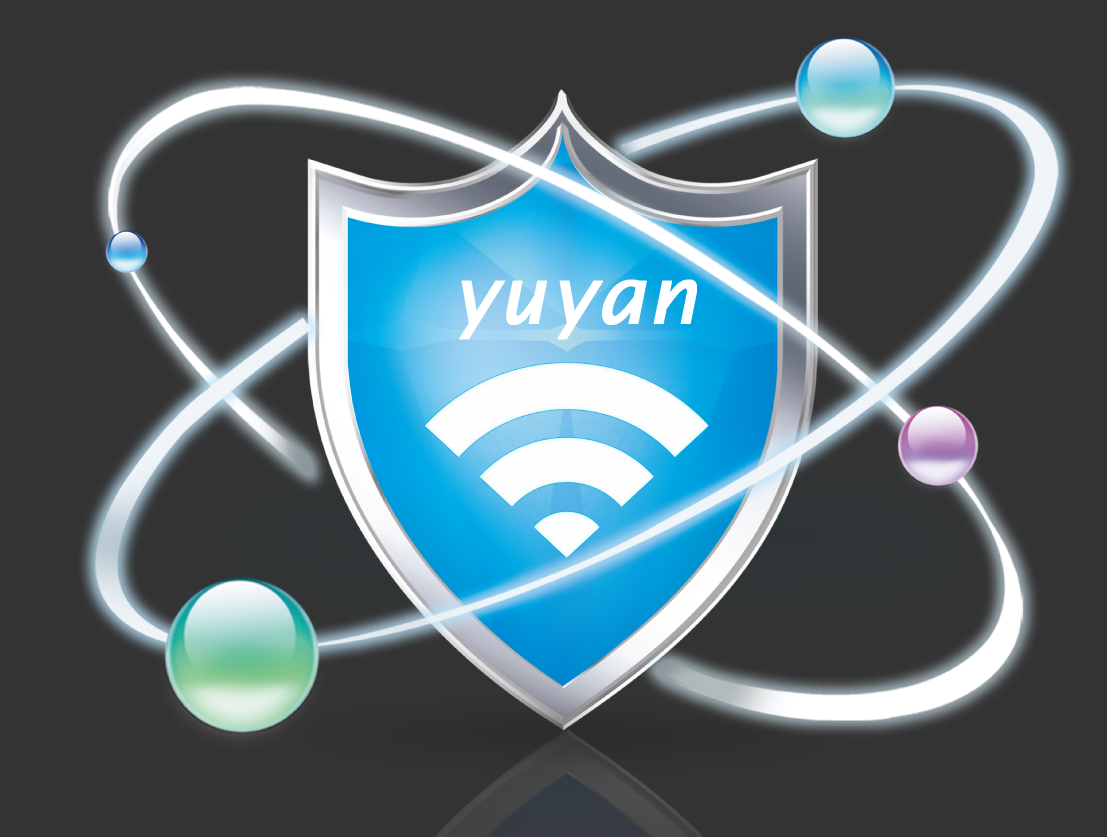
<style>
.page{position:relative;width:1107px;height:837px;background:#333333}
.page>*{position:absolute;margin:0}
.t1{font:80px "LucidaSans-Italic";color:#ffffff;font-weight:bold}
</style>
<div class="page">
<p class="t1" style="left:459px;top:279px;width:238px;height:61px">yuyan</p>
</div>
